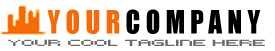
<style>
.page{position:relative;width:275px;height:51px;background:#ffffff}
.page>*{position:absolute;margin:0}
.t1{font:29.9px "Impact";letter-spacing:0.2em;color:#000000;scale:0.9 1}
.t2{font:29.9px "Impact";letter-spacing:0.2em;color:#f86a08;scale:0.9 1}
.t3{font:10px "Kroeger0853";letter-spacing:-0.05em;color:#6b6b6b;scale:1.91 1}
</style>
<div class="page">
<p class="t1" style="left:47px;top:9px;width:214px;height:25px"><span class="t2">YOUR</span>COMPANY</p>
<p class="t3" style="left:8px;top:39px;width:257px;height:7px">Your Cool Tagline Here</p>
</div>
